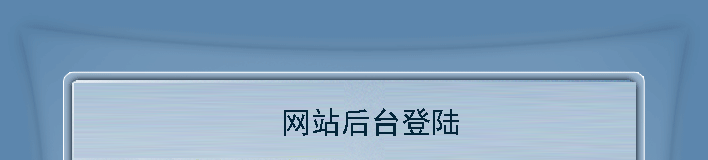
<style>
.page{position:relative;width:708px;height:160px;background:#5c86ad}
.page>*{position:absolute;margin:0}
.t1{font:30px "SimHei";color:#03253a}
</style>
<div class="page">
<p class="t1" style="left:284px;top:108px;width:175px;height:28px">网站后台登陆</p>
</div>
